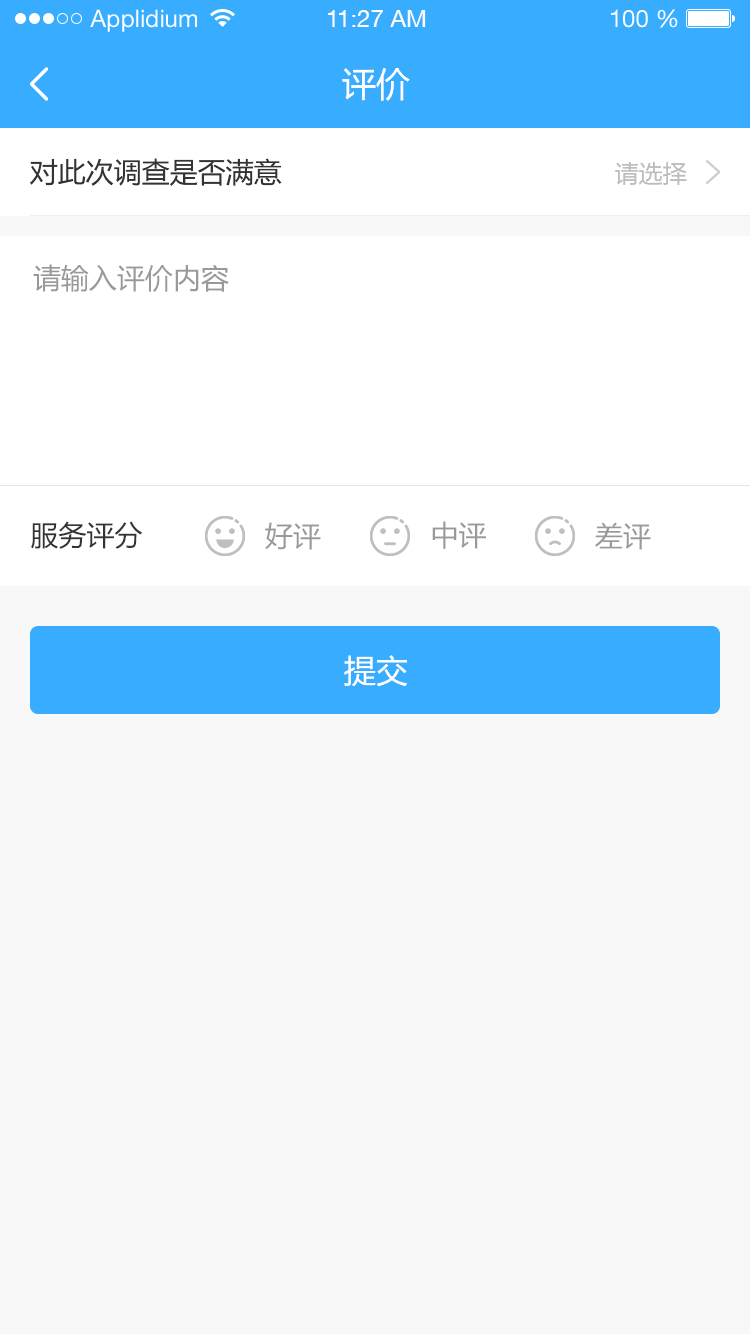
<style>
.page{position:relative;width:750px;height:1334px;background:#f8f8f8}
.page>*{position:absolute;margin:0}
.t1{font:24px "HelveticaNeueLTStd-Roman";color:#ffffff}
.t2{font:24px "HelveticaNeueCE-Roman";color:#ffffff}
.t3{font:34px "MicrosoftYaHei";color:#ffffff}
.t4{font:28px "MicrosoftYaHei";color:#333333}
.t5{font:24px "MicrosoftYaHei";color:#bdbdbd}
.t6{font:28px "MicrosoftYaHei";color:#999999}
.t7{font:32px "MicrosoftYaHei";color:#ffffff}
</style>
<div class="page">
<p class="t1" style="left:90px;top:9px;width:107px;height:23px">Applidium</p>
<p class="t2" style="left:328px;top:10px;width:98px;height:17px">11:27 AM</p>
<p class="t1" style="left:611px;top:9px;width:67px;height:19px">100 %</p>
<p class="t3" style="left:342px;top:68px;width:68px;height:33px">评价</p>
<p class="t4" style="left:30px;top:158px;width:252px;height:28px">对此次调查是否满意</p>
<p class="t5" style="left:615px;top:162px;width:72px;height:23px">请选择</p>
<p class="t6" style="left:33px;top:264px;width:196px;height:28px">请输入评价内容</p>
<p class="t4" style="left:31px;top:521px;width:112px;height:28px">服务评分</p>
<p class="t6" style="left:432px;top:521px;width:54px;height:28px">中评</p>
<p class="t6" style="left:265px;top:522px;width:56px;height:28px">好评</p>
<p class="t6" style="left:595px;top:522px;width:56px;height:28px">差评</p>
<p class="t7" style="left:344px;top:655px;width:63px;height:32px">提交</p>
</div>
